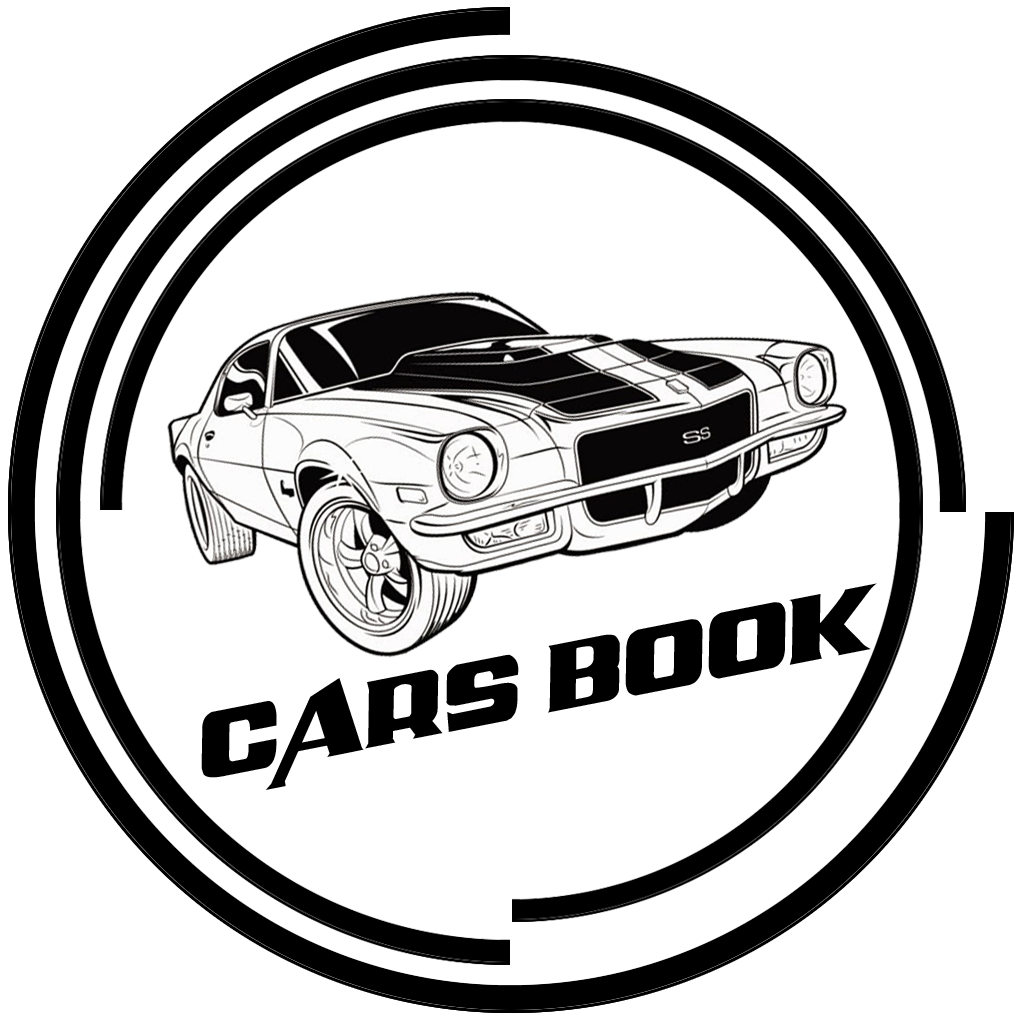
<style>
.page{position:relative;width:1024px;height:1024px;background:#ffffff}
.page>*{position:absolute;margin:0}
.t1{font:94.9px "AirMillhouseItalic";color:#000000}
</style>
<div class="page">
<p class="t1" style="left:201px;top:583px;width:676px;height:207px;rotate:-11deg">CARS BOOK</p>
</div>
